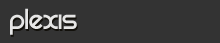
<style>
.page{position:relative;width:220px;height:43px;background:#333333}
.page>*{position:absolute;margin:0}
.t1{font:32px "REZ";color:#e6e6e6}
</style>
<div class="page">
<p class="t1" style="left:10px;top:8px;width:67px;height:27px">Plexis</p>
</div>
